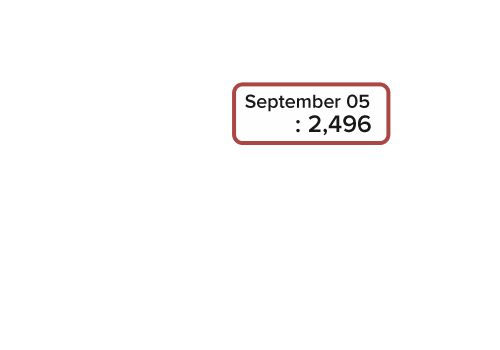
<style>
.page{position:relative;width:500px;height:350px;background:#ffffff}
.page>*{position:absolute;margin:0}
.t1{font:19.6px "ProximaNova-Semibold";color:#171819}
.t2{font:24.6px "ProximaNova-Semibold";color:#171819}
</style>
<div class="page">
<p class="t1" style="left:245px;top:94px;width:125px;height:18px">September 05</p>
<p class="t2" style="left:296px;top:115px;width:75px;height:21px">: 2,496</p>
</div>
